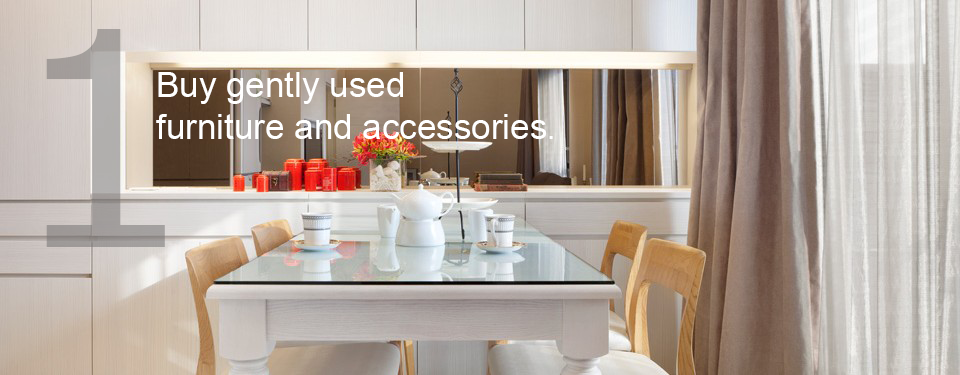
<style>
.page{position:relative;width:960px;height:375px}
.page>*{position:absolute;margin:0}
.t1{font:300px "Verdana";color:#a5a09e}
.t2{font:35px "ArialUnicodeMS";color:#ffffff}
.t3{font:30px "ArialUnicodeMS";color:#ffffff}
</style>
<div class="page">
<p class="t1" style="left:46px;top:29px;width:119px;height:218px">1</p>
<p class="t2" style="left:156px;top:72px;width:397px;height:67px">Buy gently used <br>furniture and accessories<span class="t3">.</span></p>
</div>
